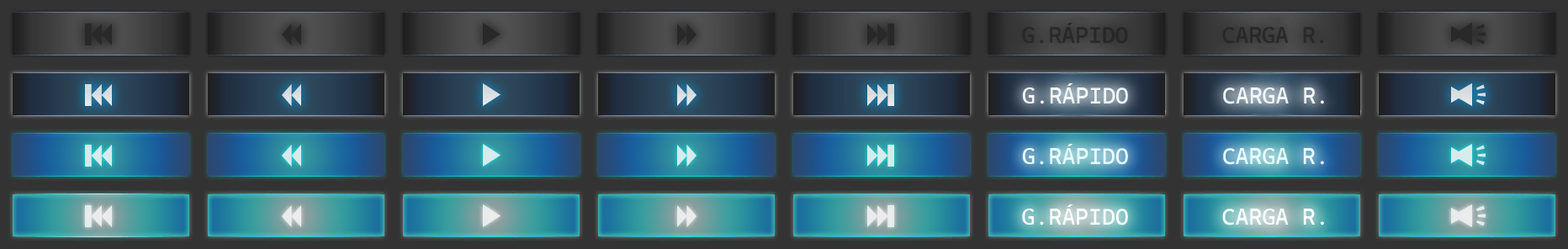
<style>
.page{position:relative;width:1568px;height:249px}
.page>*{position:absolute;margin:0}
.t1{font:22.4px "CascadiaMono-Roman";letter-spacing:0.01em;color:#222222}
.t2{font:22.4px "CascadiaMono-Roman";letter-spacing:0.01em;color:#f2f7fb}
.t3{font:22.4px "CascadiaMono-Roman";letter-spacing:0.01em;color:#e7fdff}
.t4{font:22.4px "CascadiaMono-Roman";letter-spacing:0.01em;color:#fbffff}
</style>
<div class="page">
<p class="t1" style="left:1022px;top:23px;width:106px;height:21px;opacity:0.7">G.RÁPIDO</p>
<p class="t1" style="left:1222px;top:27px;width:102px;height:17px;opacity:0.7">CARGA R.</p>
<p class="t2" style="left:1022px;top:83px;width:106px;height:21px">G.RÁPIDO</p>
<p class="t2" style="left:1223px;top:87px;width:101px;height:17px">CARGA R.</p>
<p class="t3" style="left:1022px;top:144px;width:106px;height:21px">G.RÁPIDO</p>
<p class="t3" style="left:1223px;top:148px;width:101px;height:17px">CARGA R.</p>
<p class="t4" style="left:1022px;top:204px;width:106px;height:21px">G.RÁPIDO</p>
<p class="t4" style="left:1222px;top:209px;width:102px;height:16px">CARGA R.</p>
</div>
